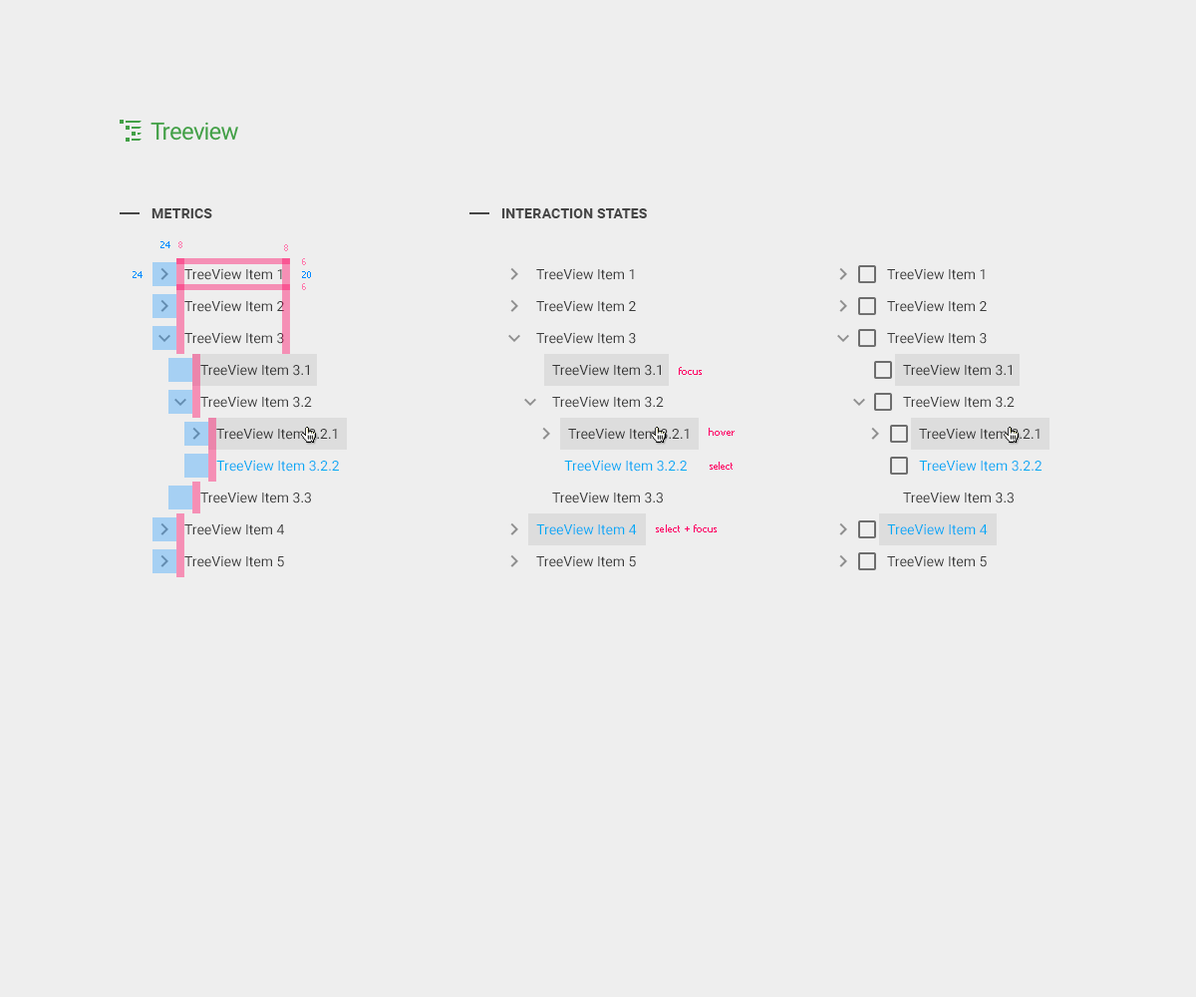
<style>
.page{position:relative;width:1196px;height:997px;background:#eeeeee}
.page>*{position:absolute;margin:0}
.t1{font:23.9px "Roboto-Regular";letter-spacing:-0.025em;color:#43a047}
.t2{font:14px "Roboto-Bold";letter-spacing:0.01em;color:#454545;text-transform:uppercase}
.t3{font:9px "Tahoma";color:#008aff}
.t4{font:9px "Tahoma";color:#ff7cae}
.t5{font:14px/31.9px "Roboto-Regular";color:#3b3b3b}
.t6{font:10px "Tahoma";color:#ff0061}
.t7{font:14px "Roboto-Regular";color:#03a9f4}
</style>
<div class="page">
<p class="t1" style="left:151px;top:122px;width:87px;height:19px">Treeview</p>
<p class="t2" style="left:152px;top:208px;width:60px;height:10px">Metrics</p>
<p class="t2" style="left:501px;top:208px;width:146px;height:10px">Interaction states</p>
<p class="t3" style="left:160px;top:241px;width:10px;height:7px">24</p>
<p class="t4" style="left:178px;top:241px;width:4px;height:7px">8</p>
<p class="t4" style="left:284px;top:244px;width:4px;height:7px">8</p>
<p class="t5" style="left:184px;top:268px;width:153px;height:299px">TreeView Item 1<br>TreeView Item 2<br>TreeView Item 3<br>TreeView Item 3.1<br>TreeView Item 3.2<br>TreeView Item 3.2.1<br><br>TreeView Item 3.3<br>TreeView Item 4<br>TreeView Item 5</p>
<p class="t4" style="left:302px;top:258px;width:4px;height:7px">6</p>
<p class="t5" style="left:536px;top:268px;width:153px;height:299px">TreeView Item 1<br>TreeView Item 2<br>TreeView Item 3<br>TreeView Item 3.1<br>TreeView Item 3.2<br>TreeView Item 3.2.1<br><br>TreeView Item 3.3<br><br>TreeView Item 5</p>
<p class="t5" style="left:887px;top:268px;width:153px;height:299px">TreeView Item 1<br>TreeView Item 2<br>TreeView Item 3<br>TreeView Item 3.1<br>TreeView Item 3.2<br>TreeView Item 3.2.1<br><br>TreeView Item 3.3<br><br>TreeView Item 5</p>
<p class="t3" style="left:133px;top:271px;width:10px;height:7px">24</p>
<p class="t3" style="left:302px;top:271px;width:9px;height:7px">20</p>
<p class="t4" style="left:302px;top:283px;width:4px;height:7px">6</p>
<p class="t6" style="left:679px;top:367px;width:23px;height:8px">focus</p>
<p class="t6" style="left:709px;top:428px;width:26px;height:8px">hover</p>
<p class="t7" style="left:216px;top:460px;width:123px;height:12px">TreeView Item 3.2.2</p>
<p class="t7" style="left:564px;top:460px;width:123px;height:12px">TreeView Item 3.2.2</p>
<p class="t6" style="left:710px;top:462px;width:23px;height:8px">select</p>
<p class="t7" style="left:919px;top:460px;width:123px;height:12px">TreeView Item 3.2.2</p>
<p class="t7" style="left:536px;top:523px;width:101px;height:12px">TreeView Item 4</p>
<p class="t6" style="left:656px;top:524px;width:61px;height:8px">select + focus</p>
<p class="t7" style="left:887px;top:523px;width:101px;height:12px">TreeView Item 4</p>
</div>
